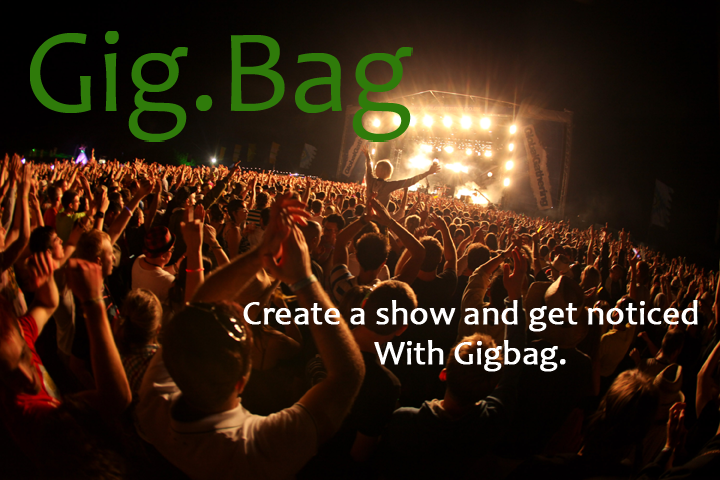
<style>
.page{position:relative;width:720px;height:480px}
.page>*{position:absolute;margin:0}
.t1{font:33.6px "Candara";color:#ffffff;font-weight:bold}
</style>
<div class="page">
<p class="t1" style="left:243px;top:300px;width:455px;height:72px;text-align:center">Create a show and get noticed<br>With Gigbag.</p>
</div>
